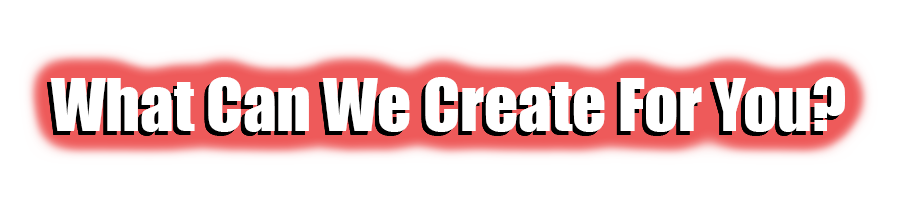
<style>
.page{position:relative;width:900px;height:212px;background:#ffffff}
.page>*{position:absolute;margin:0}
.t1{font:66.7px "Impact";color:#ffffff}
</style>
<div class="page">
<p class="t1" style="left:50px;top:77px;width:795px;height:55px">What Can We Create For You?</p>
</div>
